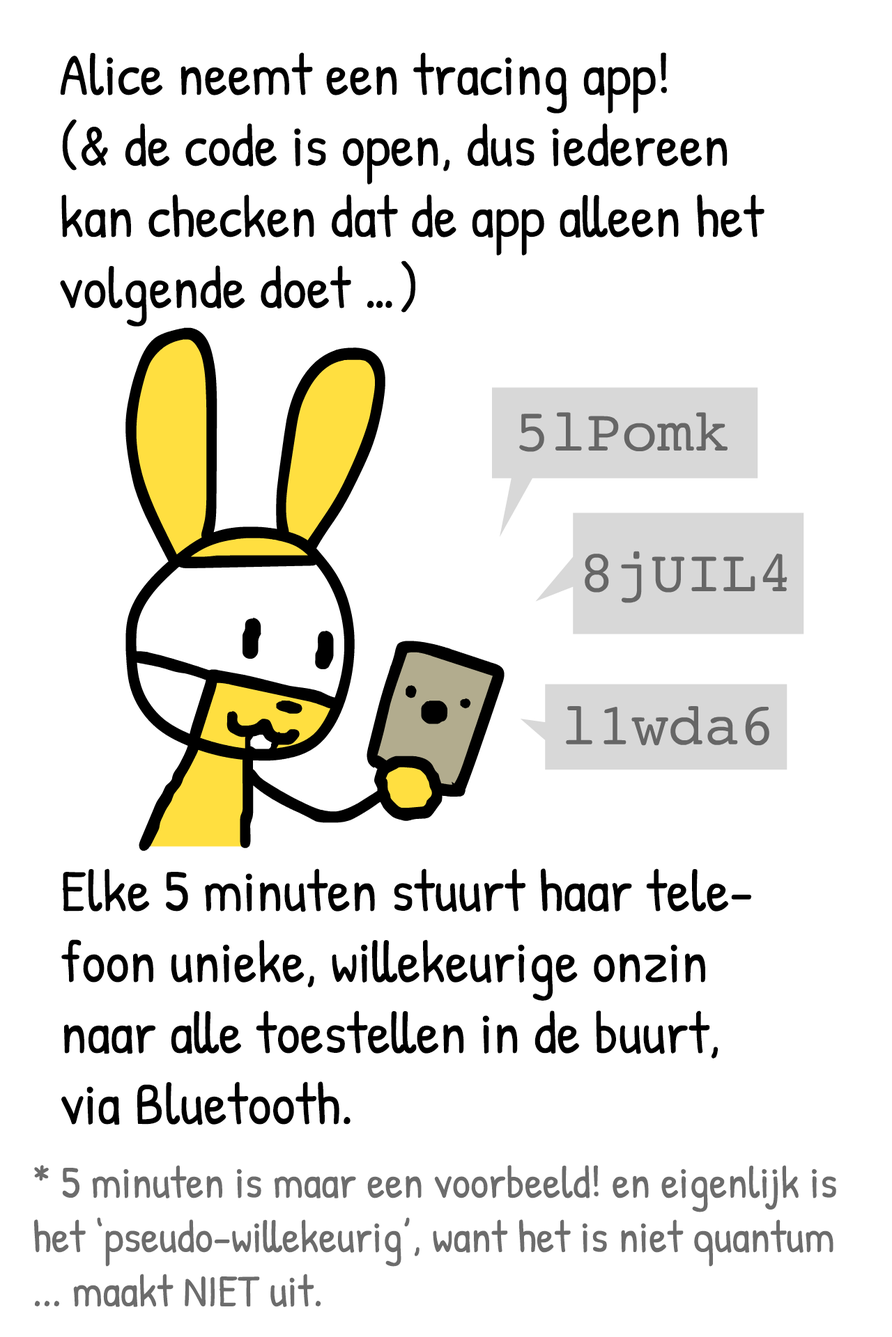
<style>
.page{position:relative;width:892px;height:1337px;background:#ffffff}
.page>*{position:absolute;margin:0}
.t1{font:59.2px "PatrickHand-Regular";color:#000000}
.t2{font:45.3px "PatrickHand-Regular";color:#6c6c6c}
</style>
<div class="page">
<p class="t1" style="left:60px;top:52px;width:704px;height:275px">Alice neemt een tracing app!<br>(&amp; de code is open, dus iedereen<br>kan checken dat de app alleen het<br>volgende doet …)</p>
<p class="t1" style="left:61px;top:869px;width:691px;height:257px">Elke 5 minuten stuurt haar tele-<br>foon unieke, willekeurige onzin<br>naar alle toestellen in de buurt,<br>via Bluetooth.</p>
<p class="t2" style="left:34px;top:1165px;width:802px;height:142px">* 5 minuten is maar een voorbeeld! en eigenlijk is<br>het ‘pseudo-willekeurig’, want het is niet quantum<br>... maakt NIET uit.</p>
</div>
